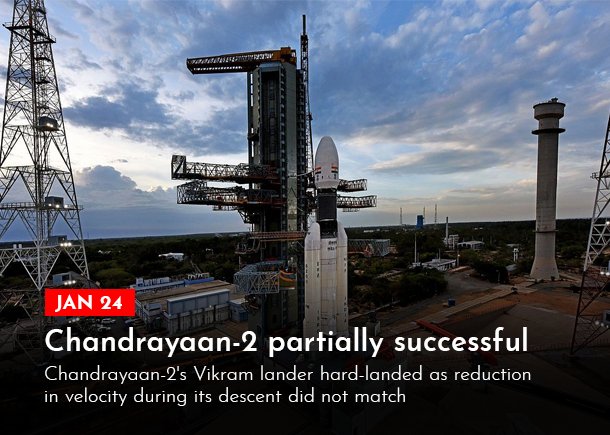
<style>
.page{position:relative;width:610px;height:435px}
.page>*{position:absolute;margin:0}
.t1{font:20px "JosefinSans-Bold";color:#ffffff}
.t2{font:30px "JosefinSans-SemiBold";color:#ffffff}
.t3{font:20px/22px "JosefinSans-Light";color:#ffffff}
</style>
<div class="page">
<p class="t1" style="left:55px;top:294px;width:67px;height:18px">JAN 24</p>
<p class="t2" style="left:45px;top:327px;width:482px;height:30px">Chandrayaan-2 partially successful</p>
<p class="t3" style="left:45px;top:365px;width:486px;height:41px">Chandrayaan-2's Vikram lander hard-landed as reduction <br>in velocity during its descent did not match</p>
</div>
